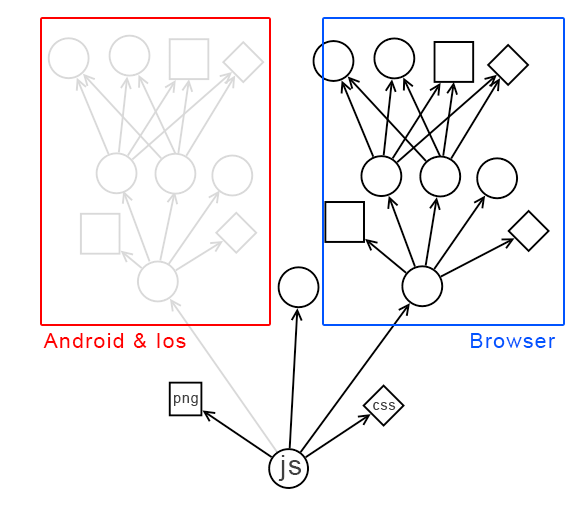
<style>
.page{position:relative;width:583px;height:526px;background:#ffffff}
.page>*{position:absolute;margin:0}
.t1{font:21.2px "ArialMT";letter-spacing:0.06em;color:#ff0000}
.t2{font:21.2px "ArialMT";letter-spacing:0.06em;color:#0054ff}
.t3{font:14.2px "ArialMT";letter-spacing:0.06em;color:#404040}
.t4{font:28.2px "ArialMT";letter-spacing:0.06em;color:#404040}
</style>
<div class="page">
<p class="t1" style="left:43px;top:333px;width:143px;height:15px">Android &amp; Ios</p>
<p class="t2" style="left:471px;top:333px;width:85px;height:15px">Browser</p>
<p class="t3" style="left:174px;top:395px;width:24px;height:11px">png</p>
<p class="t3" style="left:373px;top:402px;width:23px;height:8px">css</p>
<p class="t4" style="left:278px;top:455px;width:23px;height:26px">js</p>
</div>
